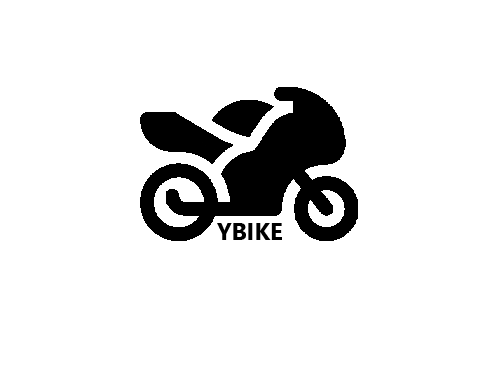
<style>
.page{position:relative;width:498px;height:380px;background:#ffffff}
.page>*{position:absolute;margin:0}
.t1{font:24px "SegoeUI-Bold";color:#000000}
</style>
<div class="page">
<p class="t1" style="left:217px;top:223px;width:65px;height:17px">YBIKE</p>
</div>
